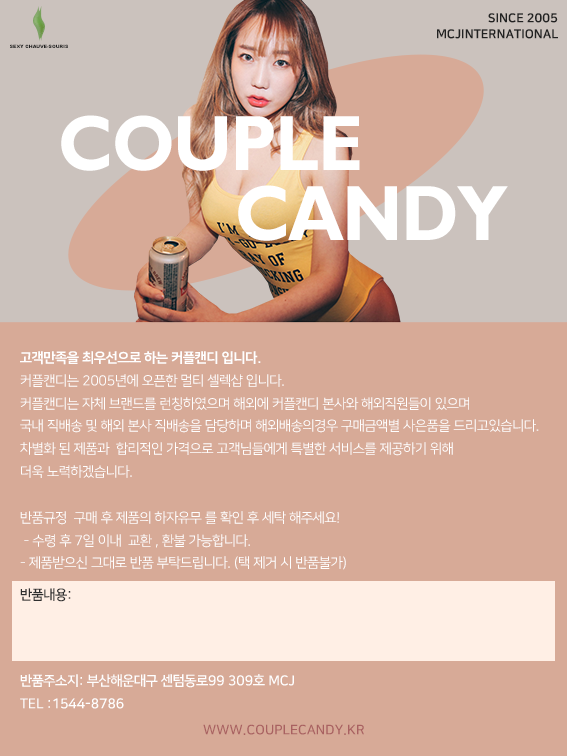
<style>
.page{position:relative;width:567px;height:756px;background:#d7aa97}
.page>*{position:absolute;margin:0}
.t1{font:12.6px "NanumSquare_acEB";color:#222222}
.t2{font:4.5px "Arial-Black";color:#222222;text-transform:uppercase}
.t3{font:78.7px "GillSansMT-Bold";letter-spacing:-0.025em;color:#ffffff;text-transform:uppercase;scale:0.91 1}
.t4{font:13.7px/22.8px "NanumSquare_acR";color:#ffffff}
.t5{font:13.7px/22.8px "NanumSquare_acEB";color:#ffffff}
.t6{font:13.7px/32px "NanumSquare_acB";color:#2f2f2f}
.t7{font:13.7px/40px "NanumSquare_acB";color:#ffffff}
.t8{font:13.7px/22.8px "NanumSquare_acB";color:#ffffff}
.t9{font:13.3px "NanumSquare_acB";color:#a96161}
</style>
<div class="page">
<p class="t1" style="left:488px;top:13px;width:70px;height:10px">SINCE 2005</p>
<p class="t1" style="left:437px;top:29px;width:121px;height:10px">MCJINTERNATIONAL</p>
<p class="t2" style="left:10px;top:44px;width:58px;height:4px">sexy chauve-souris</p>
<p class="t3" style="left:61px;top:115px;width:299px;height:56px">COUPLE</p>
<p class="t3" style="left:238px;top:185px;width:270px;height:56px">CANDY</p>
<p class="t4" style="left:20px;top:351px;width:519px;height:358px"><span class="t5">고객만족을 최우선으로 하는 커플캔디 입니다. <br></span>커플캔디는 2005년에 오픈한 멀티 셀렉샵 입니다.<br>커플캔디는 자체 브랜드를 런칭하였으며 해외에 커플캔디 본사와 해외직원들이 있으며<br>국내 직배송 및 해외 본사 직배송을 담당하며 해외배송의경우 구매금액별 사은품을 드리고있습니다.<br>차별화 된 제품과  합리적인 가격으로 고객님들에게 특별한 서비스를 제공하기 위해<br>더욱 노력하겠습니다. <br>        <br>반품규정  구매 후 제품의 하자유무 를 확인 후 세탁 해주세요!<br> - 수령 후 7일 이내  교환 , 환불 가능합니다.       <br>- 제품받으신 그대로 반품 부탁드립니다. (택 제거 시 반품불가)       <br><span class="t6">반품내용:        <br><br>        <br></span><span class="t7">반품주소지: 부산해운대구 센텀동로99 309호 MCJ<br></span><span class="t8">TEL :1544-8786</span></p>
<p class="t9" style="left:203px;top:724px;width:161px;height:11px">WWW.COUPLECANDY.KR</p>
</div>
